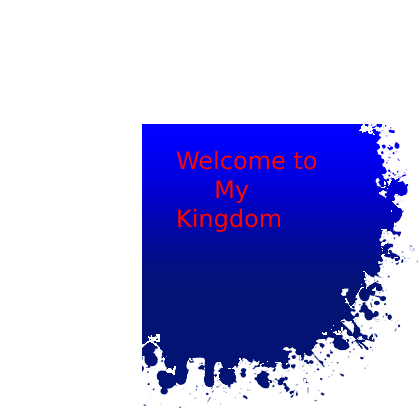
<style>
.page{position:relative;width:419px;height:408px;background:#ffffff}
.page>*{position:absolute;margin:0}
.t1{font:24px "DejaVuSans";color:#f90606}
</style>
<div class="page">
<p class="t1" style="left:176px;top:150px;width:141px;height:82px">Welcome to<br>     My <br>Kingdom</p>
</div>
